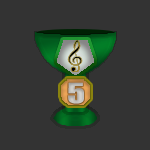
<style>
.page{position:relative;width:150px;height:150px;background:#333333}
.page>*{position:absolute;margin:0}
.t1{font:25.7px "Impact";color:#c2c0bb;scale:1.32 1}
</style>
<div class="page">
<p class="t1" style="left:68px;top:82px;width:16px;height:22px">5</p>
</div>
